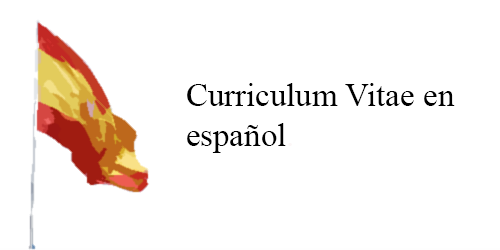
<style>
.page{position:relative;width:500px;height:250px;background:#ffffff}
.page>*{position:absolute;margin:0}
.t1{font:33px "TimesNewRomanPSMT";color:#000000}
.t2{font:33px "TimesNewRomanPSMT";color:#fcf7f7}
</style>
<div class="page">
<p class="t1" style="left:187px;top:83px;width:268px;height:70px">Curriculum Vitae en <br>español<span class="t2">.</span></p>
</div>
